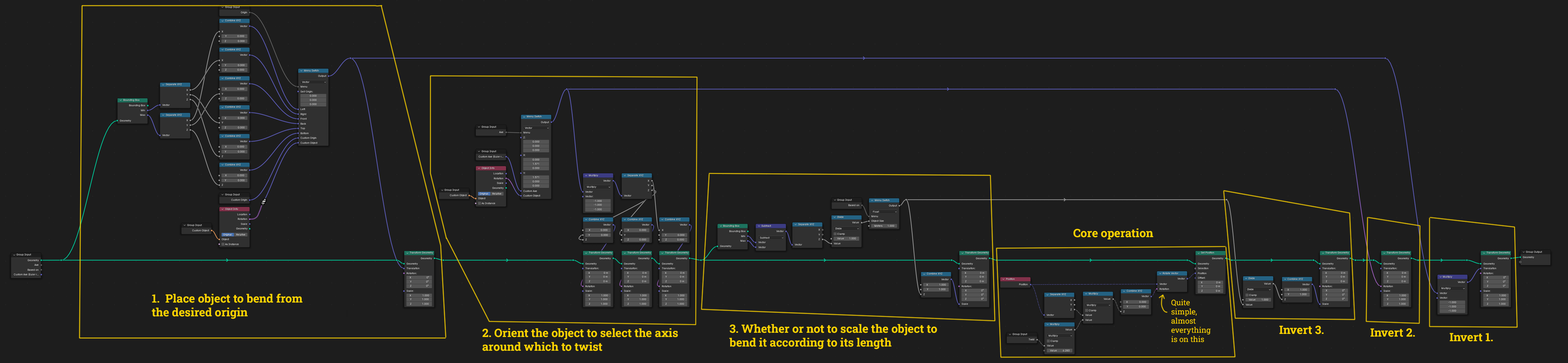
<style>
.page{position:relative;width:1568px;height:363px;background:#1d1d1d}
.page>*{position:absolute;margin:0}
.t1{font:11.5px "RobotoSlab-Bold";color:#ffd400}
.t2{font:7.7px "RobotoSlab-Regular";color:#ffd400}
</style>
<div class="page">
<p class="t1" style="left:1073px;top:229px;width:80px;height:11px">Core operation</p>
<p class="t1" style="left:152px;top:294px;width:150px;height:25px">1.  Place object to bend from the desired origin</p>
<p class="t2" style="left:1171px;top:299px;width:40px;height:44px">Quite simple, almost everything is on this guy</p>
<p class="t1" style="left:482px;top:328px;width:196px;height:23px">2. Orient the object to select the axis around which to twist</p>
<p class="t1" style="left:729px;top:324px;width:208px;height:26px">3. Whether or not to scale the object to bend it according to its length</p>
<p class="t1" style="left:1279px;top:326px;width:45px;height:9px">Invert 3.</p>
<p class="t1" style="left:1370px;top:328px;width:45px;height:9px">Invert 2.</p>
<p class="t1" style="left:1450px;top:333px;width:43px;height:9px">Invert 1.</p>
</div>
